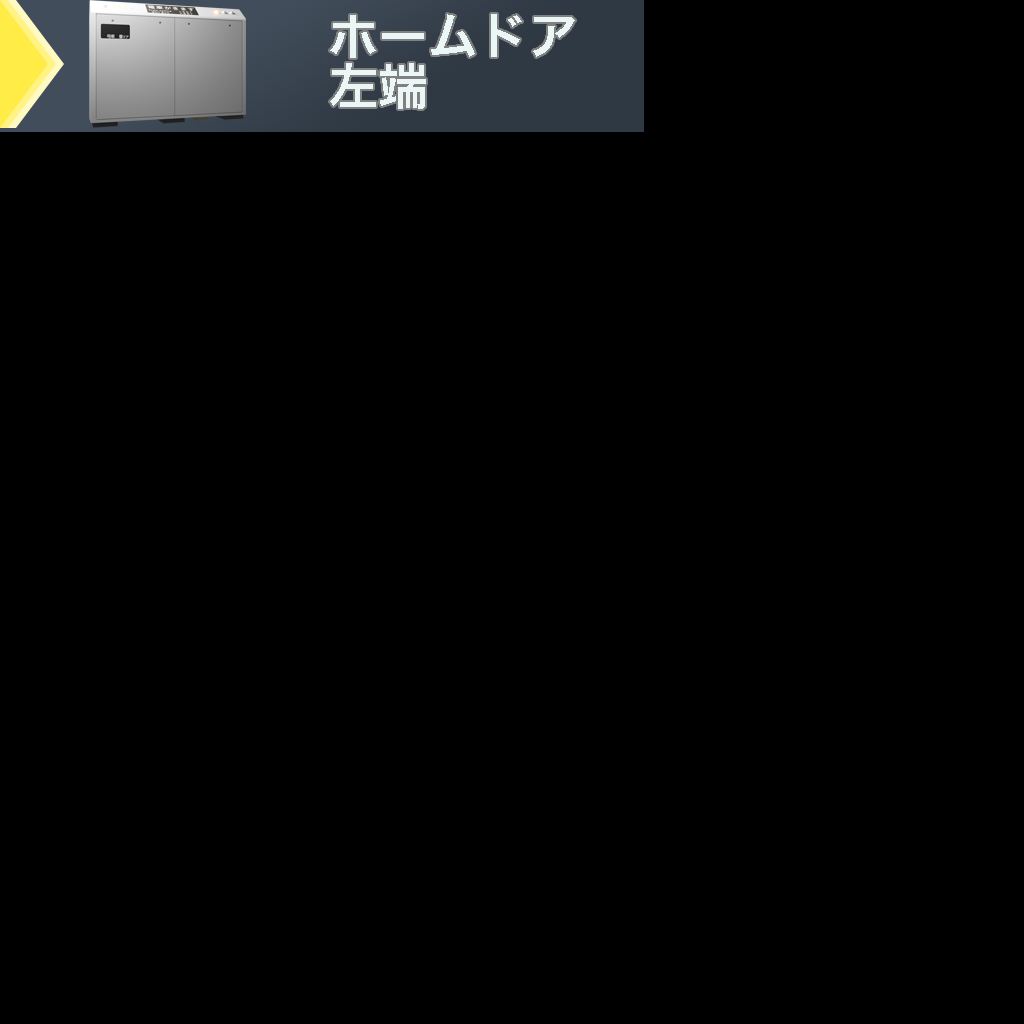
<style>
.page{position:relative;width:1024px;height:1024px;background:#000000}
.page>*{position:absolute;margin:0}
.t1{font:50px/50px "HiraKakuProN-W6";color:#ebf6f7}
</style>
<div class="page">
<p class="t1" style="left:330px;top:14px;width:245px;height:95px">ホームドア<br>左端</p>
</div>
